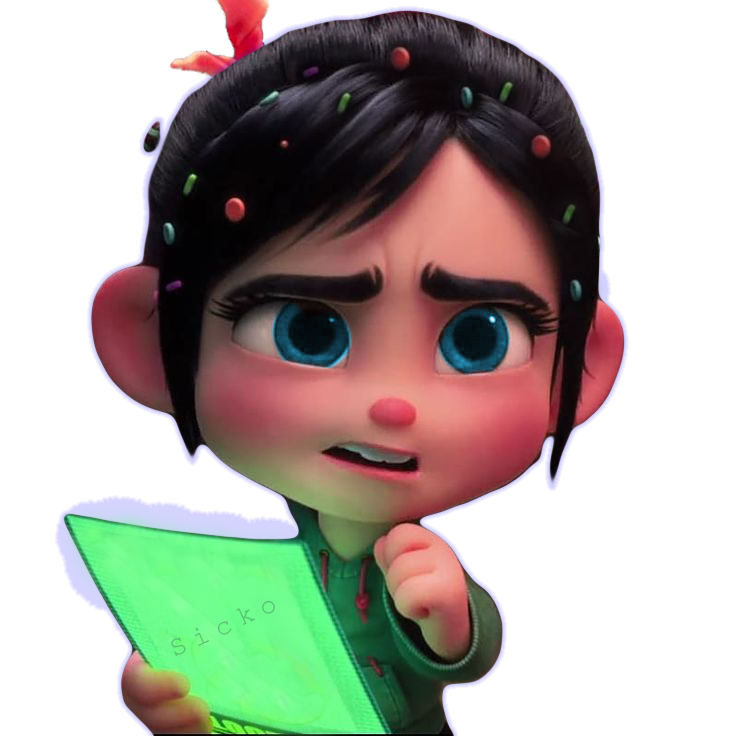
<style>
.page{position:relative;width:736px;height:736px;background:#ffffff}
.page>*{position:absolute;margin:0}
.t1{font:27.3px "CourierNewPSMT";letter-spacing:0.3em;color:#5ac176}
</style>
<div class="page">
<p class="t1" style="left:171px;top:600px;width:104px;height:56px;rotate:-25deg">Sickov</p>
</div>
